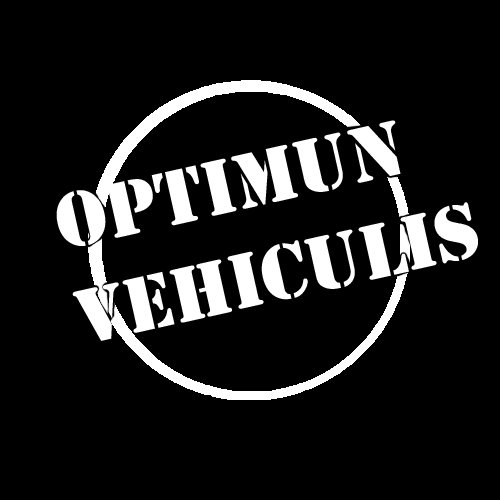
<style>
.page{position:relative;width:500px;height:500px;background:#000000}
.page>*{position:absolute;margin:0}
.t1{font:80.7px "Stencil";color:#ffffff}
</style>
<div class="page">
<p class="t1" style="left:56px;top:120px;width:422px;height:221px;rotate:-13deg">Optimun<br>Vehiculis</p>
</div>
